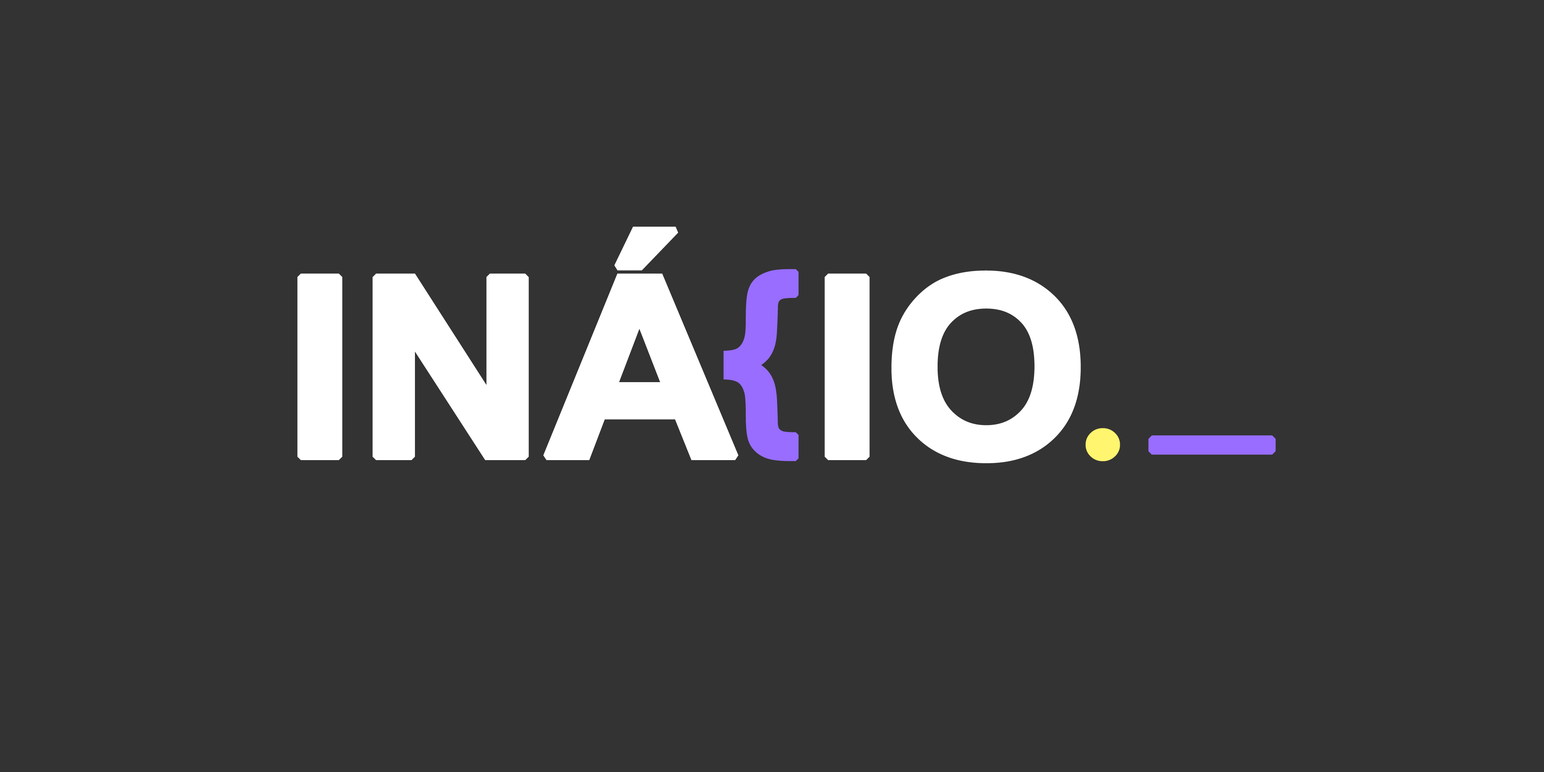
<style>
.page{position:relative;width:1544px;height:772px;background:#333333}
.page>*{position:absolute;margin:0}
.t1{font:430.3px "Arial-BoldMT";letter-spacing:-0.025em;color:#ffffff;font-weight:bold;scale:1.05 1}
.t2{font:340.7px "Arial-BoldMT";letter-spacing:-0.025em;color:#986dff;font-weight:bold;scale:1.05 1}
.t3{font:297.5px "TimesNewRomanPS-BoldMT";letter-spacing:-0.025em;color:#fff56e;font-weight:bold;scale:1.05 1}
.t4{font:423px "ArialNarrow";letter-spacing:-0.025em;color:#986dff;font-weight:bold;scale:1.05 1}
</style>
<div class="page">
<p class="t1" style="left:297px;top:227px;width:784px;height:236px">INÁ IO</p>
<p class="t2" style="left:724px;top:269px;width:75px;height:192px">{</p>
<p class="t3" style="left:1086px;top:428px;width:34px;height:33px">.</p>
<p class="t4" style="left:1149px;top:435px;width:127px;height:20px">_</p>
</div>
